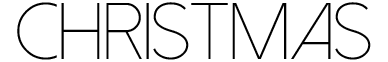
<style>
.page{position:relative;width:388px;height:62px;background:#ffffff}
.page>*{position:absolute;margin:0}
.t1{font:80px "DolceVitaLight";color:#000000}
</style>
<div class="page">
<p class="t1" style="left:17px;top:2px;width:354px;height:58px">CHRISTMAS</p>
</div>
